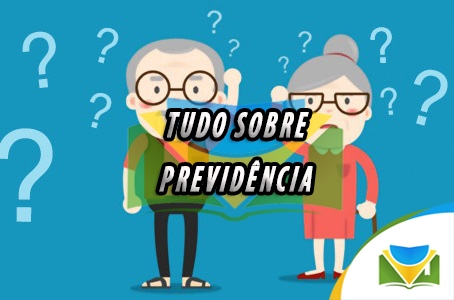
<style>
.page{position:relative;width:454px;height:300px;background:#1696bd}
.page>*{position:absolute;margin:0}
.t1{font:36.8px/27.1px "MyriadPro-BoldCondIt";letter-spacing:0.1em;text-transform:uppercase;font-weight:bold;font-style:italic;scale:0.69 1}
</style>
<div class="page">
<p class="t1" style="left:159px;top:112px;width:154px;height:80px;text-align:center">tudo sobre <br><br>Previdência</p>
</div>
